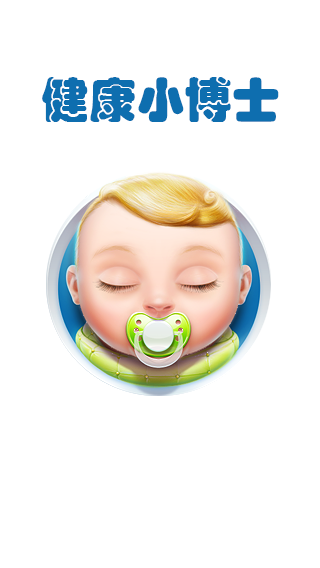
<style>
.page{position:relative;width:320px;height:568px;background:#ffffff}
.page>*{position:absolute;margin:0}
.t1{font:48px "STHupo";color:#0e6eaf}
</style>
<div class="page">
<p class="t1" style="left:42px;top:77px;width:237px;height:45px">健康小博士</p>
</div>
